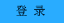
<style>
.page{position:relative;width:64px;height:23px;background:#29acff}
.page>*{position:absolute;margin:0}
.t1{font:12px "SimSun"}
</style>
<div class="page">
<p class="t1" style="left:16px;top:5px;width:29px;height:11px">登 录</p>
</div>
